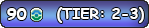
<style>
.page{position:relative;width:149px;height:28px}
.page>*{position:absolute;margin:0}
.t1{font:12px "ComicSansMS-Bold";color:#ffffff}
.t2{font:14.7px "ComicSansMS-Bold";color:#ffffff}
</style>
<div class="page">
<p class="t1" style="left:7px;top:8px;width:20px;height:12px">90</p>
<p class="t2" style="left:57px;top:7px;width:87px;height:16px">(TIER: 2-3)</p>
</div>
